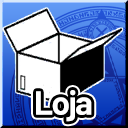
<style>
.page{position:relative;width:128px;height:128px;background:#ffffff}
.page>*{position:absolute;margin:0}
.t1{font:33.3px "Barlow-Bold";letter-spacing:-0.05em;color:#ffffff}
</style>
<div class="page">
<p class="t1" style="left:36px;top:90px;width:56px;height:32px">Loja</p>
</div>
